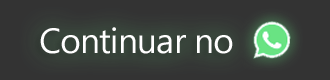
<style>
.page{position:relative;width:330px;height:80px;background:#333333}
.page>*{position:absolute;margin:0}
.t1{font:34.9px "SegoeUI";letter-spacing:-0.025em;color:#ffffff}
</style>
<div class="page">
<p class="t1" style="left:40px;top:27px;width:193px;height:27px">Continuar no</p>
</div>
